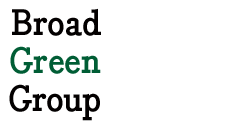
<style>
.page{position:relative;width:227px;height:129px;background:#ffffff}
.page>*{position:absolute;margin:0}
.t1{font:36px/38px "BodoniEgyptian-Bold";color:#030000}
.t2{font:36px/38px "BodoniEgyptian-Bold";color:#005d35}
</style>
<div class="page">
<p class="t1" style="left:9px;top:8px;width:92px;height:113px;text-align:right">Broad<br><span class="t2">Green<br></span>Group</p>
</div>
